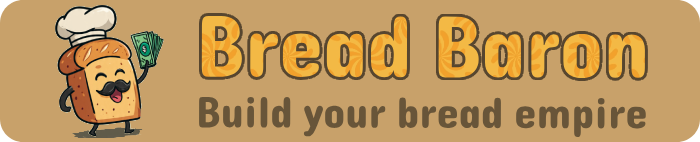
<style>
.page{position:relative;width:700px;height:142px;background:#c8a16a}
.page>*{position:absolute;margin:0}
.t1{font:88.9px "Dangrek-Regular";color:#f3b842}
.t2{font:44.6px "Dangrek-Regular";color:#685539}
</style>
<div class="page">
<p class="t1" style="left:201px;top:16px;width:444px;height:63px">Bread Baron</p>
<p class="t2" style="left:199px;top:97px;width:447px;height:40px">Build your bread empire</p>
</div>
